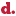
<style>
.page{position:relative;width:16px;height:16px;background:#ffffff}
.page>*{position:absolute;margin:0}
.t1{font:15.7px "ChunkFive";color:#bf1d38}
</style>
<div class="page">
<p class="t1" style="left:1px;top:2px;width:14px;height:12px">d.</p>
</div>
